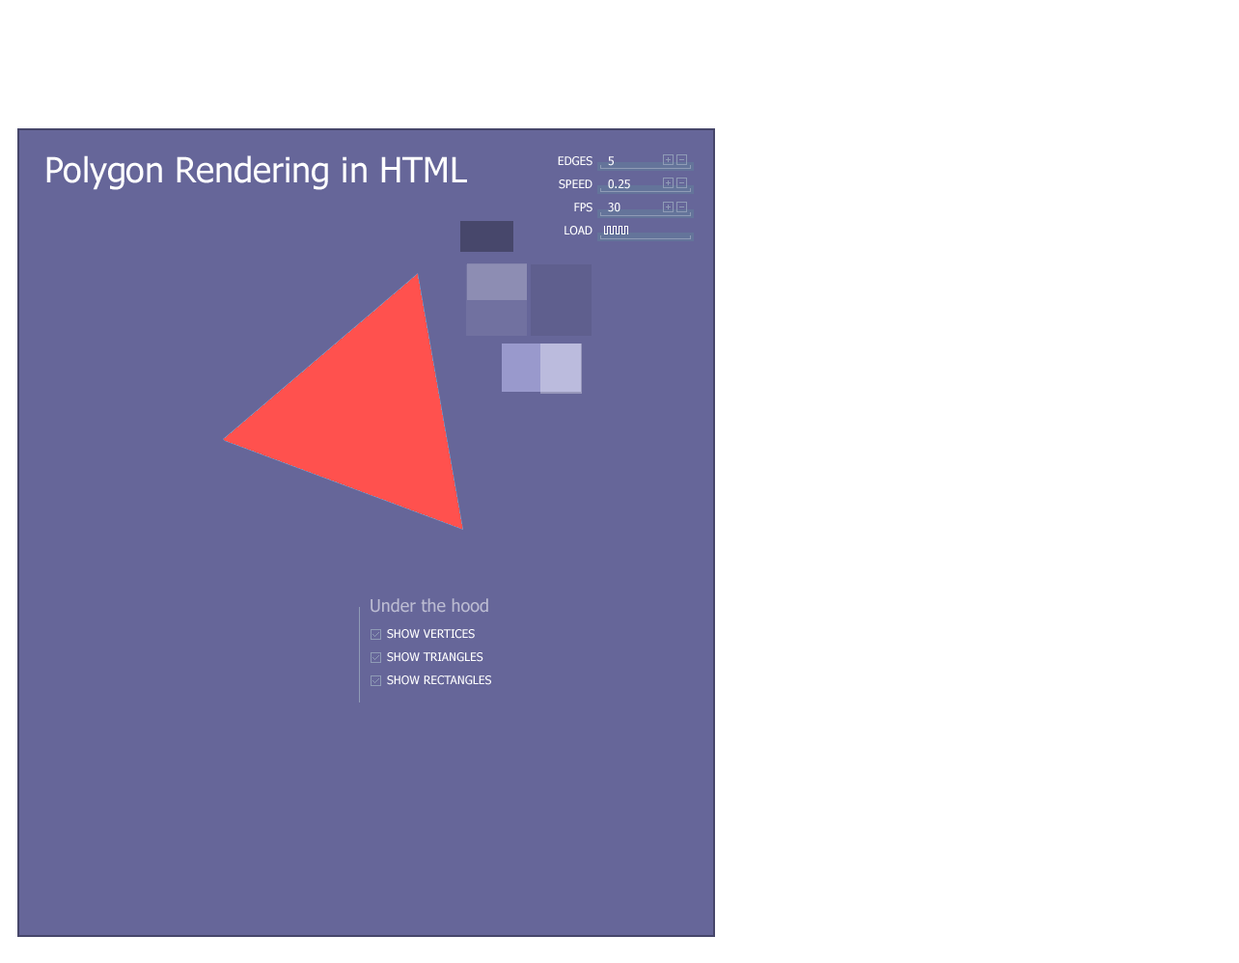
<style>
.page{position:relative;width:1239px;height:963px;background:#ffffff}
.page>*{position:absolute;margin:0}
.t1{font:34.7px "Tahoma";color:#ffffff}
.t2{font:11.6px/23.2px "Tahoma";color:#ffffff}
.t3{font:17.4px "Tahoma";color:#bcbcd2}
</style>
<div class="page">
<p class="t1" style="left:46px;top:155px;width:421px;height:35px">Polygon Rendering in HTML</p>
<p class="t2" style="left:558px;top:156px;width:34px;height:79px;text-align:right">EDGES<br>SPEED<br>FPS<br>LOAD</p>
<p class="t2" style="left:608px;top:156px;width:22px;height:56px">5<br>0.25<br>30</p>
<p class="t3" style="left:370px;top:598px;width:118px;height:15px">Under the hood</p>
<p class="t2" style="left:387px;top:629px;width:104px;height:56px">SHOW VERTICES<br>SHOW TRIANGLES<br>SHOW RECTANGLES</p>
</div>
